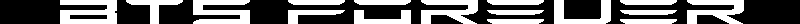
<style>
.page{position:relative;width:800px;height:24px;background:#000000}
.page>*{position:absolute;margin:0}
.t1{font:38px "TESLA";color:#ffffff;scale:2 1}
</style>
<div class="page">
<p class="t1" style="left:60px;top:0px;width:684px;height:24px">BTS FOREVER</p>
</div>
